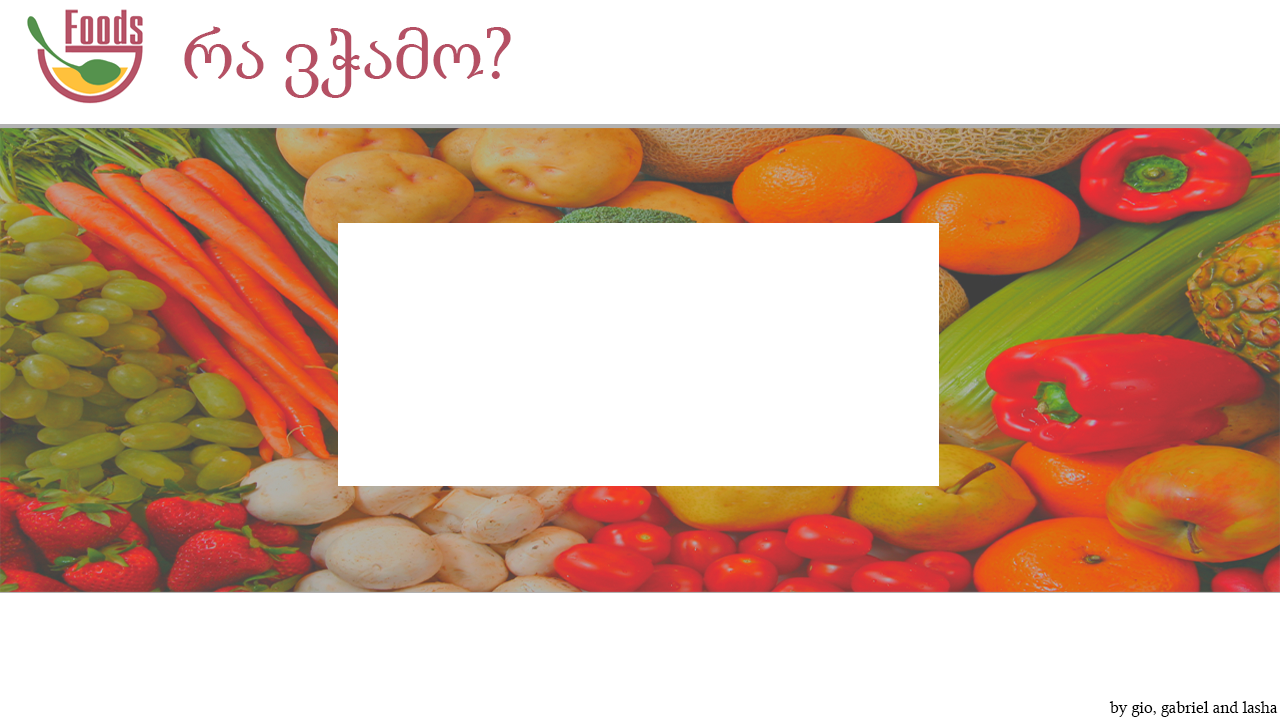
<style>
.page{position:relative;width:1280px;height:720px;background:#ffffff}
.page>*{position:absolute;margin:0}
.t1{font:75px "Sylfaen";color:#b55064}
.t2{font:16.7px "Sylfaen";color:#000000}
</style>
<div class="page">
<p class="t1" style="left:184px;top:26px;width:327px;height:72px">რა ვჭამო?</p>
<p class="t2" style="left:1109px;top:701px;width:169px;height:16px">by gio, gabriel and lasha</p>
</div>
